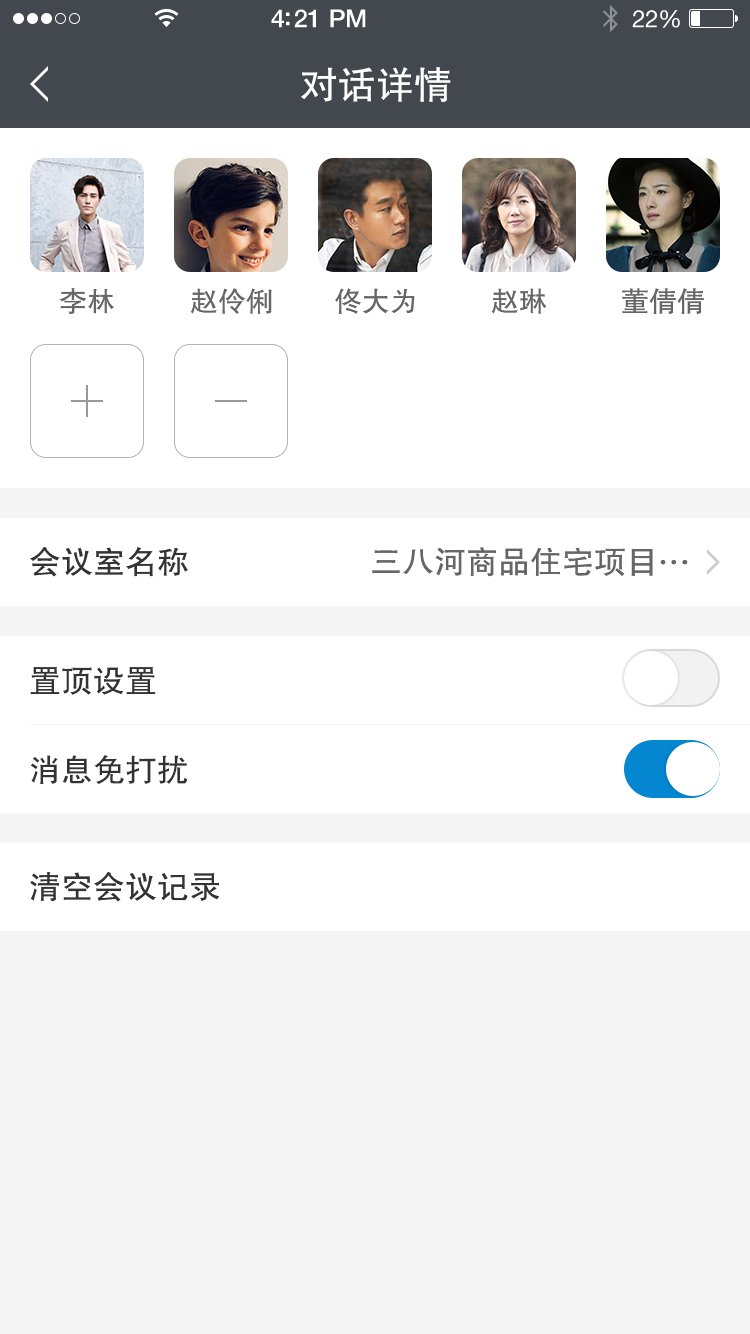
<style>
.page{position:relative;width:750px;height:1334px;background:#ffffff}
.page>*{position:absolute;margin:0}
.t1{font:38px "FZHTJW--GB1-0";color:#ffffff}
.t2{font:28px "FZHTJW--GB1-0";color:#666666}
.t3{font:32px "FZHTJW--GB1-0";color:#333333}
.t4{font:32px "FZHTJW--GB1-0";color:#666666}
.t5{font:32.1px "FZHTJW--GB1-0";color:#333333}
</style>
<div class="page">
<p class="t1" style="left:301px;top:67px;width:150px;height:35px">对话详情</p>
<p class="t2" style="left:59px;top:288px;width:55px;height:26px">李林</p>
<p class="t2" style="left:190px;top:288px;width:82px;height:26px">赵伶俐</p>
<p class="t2" style="left:335px;top:288px;width:80px;height:26px">佟大为</p>
<p class="t2" style="left:491px;top:288px;width:56px;height:26px">赵琳</p>
<p class="t2" style="left:622px;top:288px;width:82px;height:26px">董倩倩</p>
<p class="t3" style="left:30px;top:547px;width:158px;height:30px">会议室名称</p>
<p class="t4" style="left:372px;top:547px;width:316px;height:30px">三八河商品住宅项目…</p>
<p class="t3" style="left:30px;top:667px;width:126px;height:28px">置顶设置</p>
<p class="t5" style="left:31px;top:755px;width:157px;height:29px">消息免打扰</p>
<p class="t3" style="left:30px;top:872px;width:190px;height:30px">清空会议记录</p>
</div>
